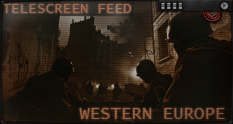
<style>
.page{position:relative;width:233px;height:124px}
.page>*{position:absolute;margin:0}
.t1{font:14.3px "LucidaConsole";color:#9a6f58}
.t2{font:17.3px "LucidaConsole";color:#8f5e42}
</style>
<div class="page">
<p class="t1" style="left:2px;top:4px;width:129px;height:9px">TELESCREEN FEED</p>
<p class="t2" style="left:79px;top:108px;width:146px;height:11px">WESTERN EUROPE</p>
</div>
